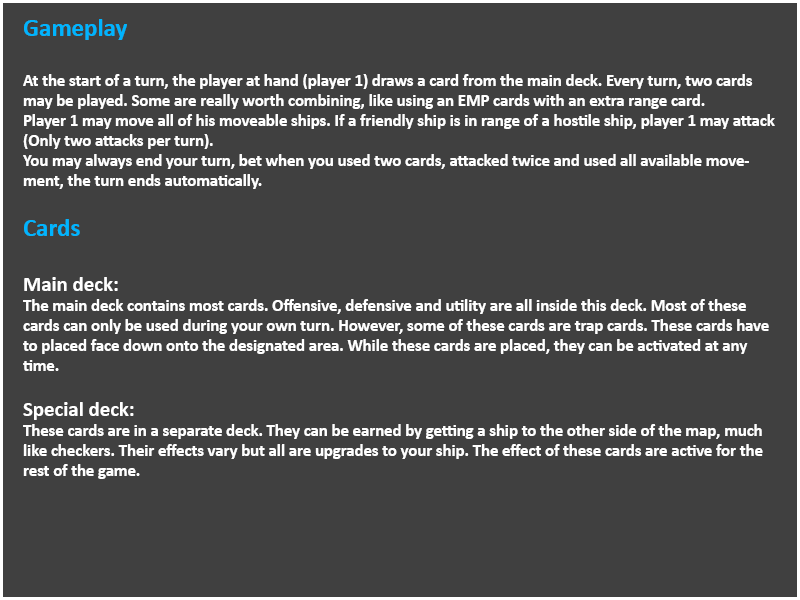
<style>
.page{position:relative;width:800px;height:600px;background:#404040}
.page>*{position:absolute;margin:0}
.t1{font:16.7px "Calibri-Bold";color:#ffffff}
.t2{font:25px "Calibri-Bold";color:#00b4ff}
.t3{font:20.8px "Calibri-Bold";color:#ffffff}
</style>
<div class="page">
<p class="t1" style="left:23px;top:19px;width:752px;height:460px"><span class="t2">Gameplay<br><br></span>At the start of a turn, the player at hand (player 1) draws a card from the main deck. Every turn, two cards may be played. Some are really worth combining, like using an EMP cards with an extra range card. <br>Player 1 may move all of his moveable ships. If a friendly ship is in range of a hostile ship, player 1 may attack (Only two attacks per turn). <br>You may always end your turn, bet when you used two cards, attacked twice and used all available movement, the turn ends automatically. <br><br><span class="t2">Cards<br><br></span><span class="t3">Main deck:<br></span>The main deck contains most cards. Offensive, defensive and utility are all inside this deck. Most of these cards can only be used during your own turn. However, some of these cards are trap cards. These cards have to placed face down onto the designated area. While these cards are placed, they can be activated at any time.<br><br><span class="t3">Special deck:<br></span>These cards are in a separate deck. They can be earned by getting a ship to the other side of the map, much like checkers. Their effects vary but all are upgrades to your ship. The effect of these cards are active for the rest of the game.</p>
</div>
